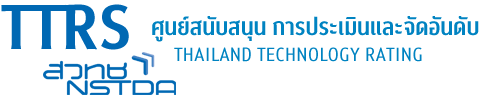
<style>
.page{position:relative;width:479px;height:99px;background:#ffffff}
.page>*{position:absolute;margin:0}
.t1{font:24px "CHULALONGKORN-Bold";color:#0083c1}
.t2{font:20px "CHULALONGKORN-Regular";color:#0083c1}
</style>
<div class="page">
<p class="t1" style="left:152px;top:16px;width:327px;height:26px">ศูนย์สนับสนุน การประเมินและจัดอันดับ</p>
<p class="t2" style="left:174px;top:47px;width:248px;height:15px">THAILAND TECHNOLOGY RATING</p>
</div>
